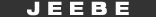
<style>
.page{position:relative;width:156px;height:17px;background:#333333}
.page>*{position:absolute;margin:0}
.t1{font:18px "HelveticaNeueLT-HeavyExt";color:#ffffff}
</style>
<div class="page">
<p class="t1" style="left:27px;top:1px;width:102px;height:15px">J E E B E</p>
</div>
